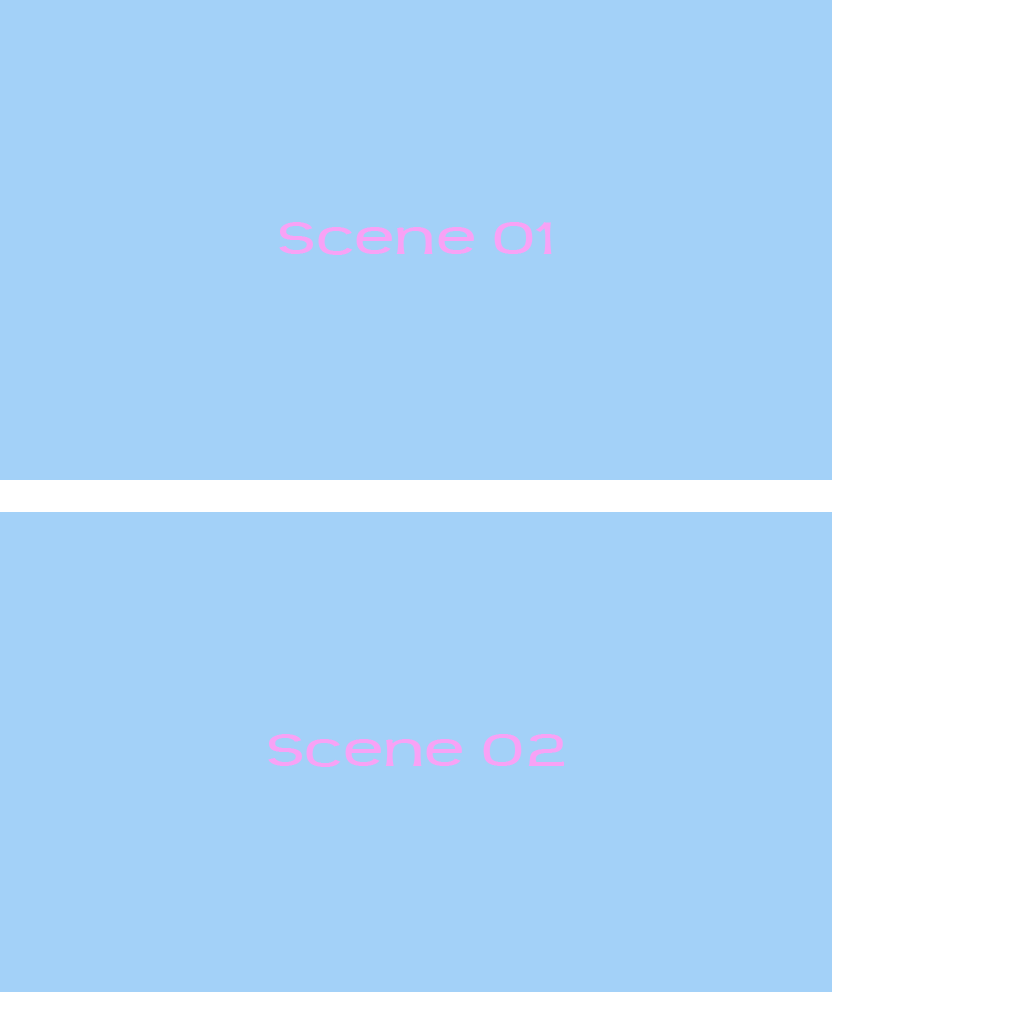
<style>
.page{position:relative;width:1024px;height:1024px;background:#a3d1f8}
.page>*{position:absolute;margin:0}
.t1{font:50.4px "Teen";color:#f8a2f5;scale:1.43 1}
</style>
<div class="page">
<p class="t1" style="left:279px;top:222px;width:273px;height:33px">Scene 01</p>
<p class="t1" style="left:268px;top:734px;width:297px;height:33px">Scene 02</p>
</div>
